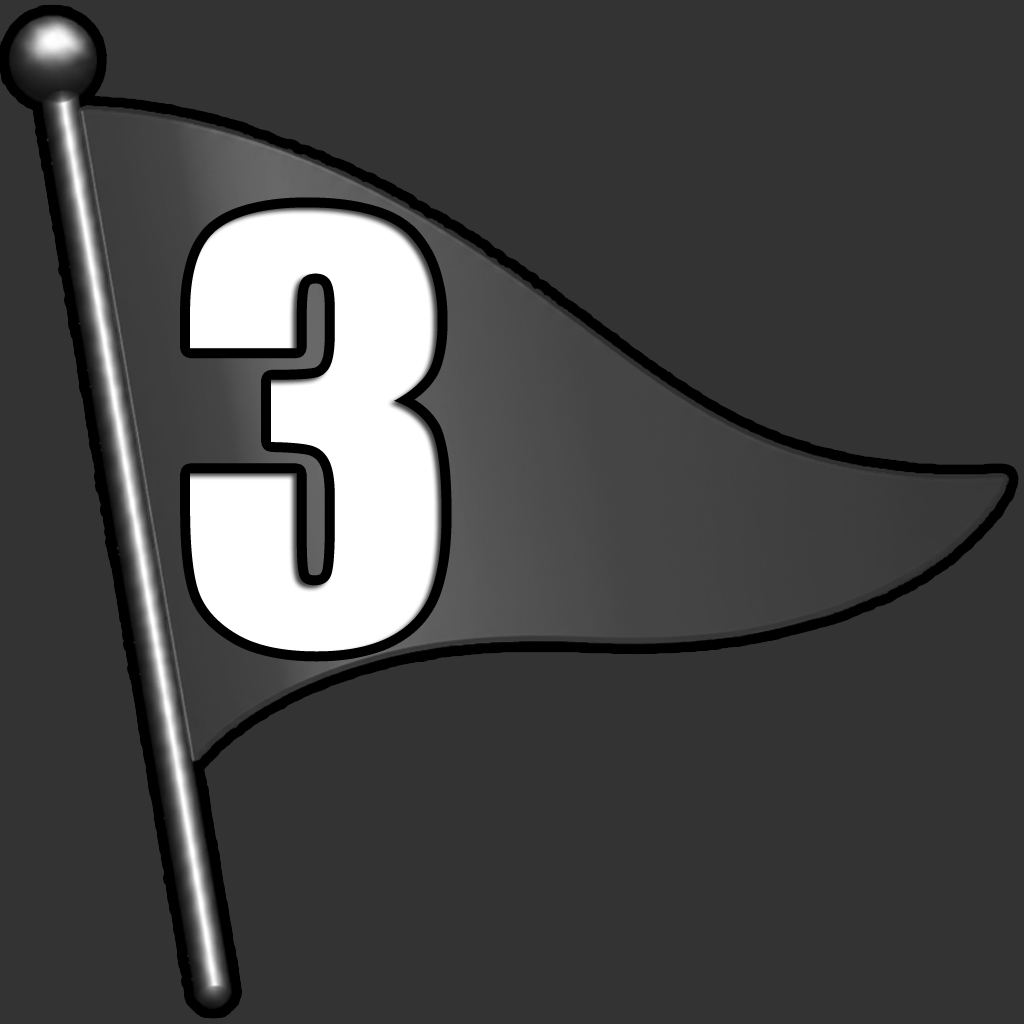
<style>
.page{position:relative;width:1024px;height:1024px;background:#333333}
.page>*{position:absolute;margin:0}
.t1{font:539.9px "Impact";color:#ffffff}
</style>
<div class="page">
<p class="t1" style="left:190px;top:207px;width:252px;height:445px">3</p>
</div>
